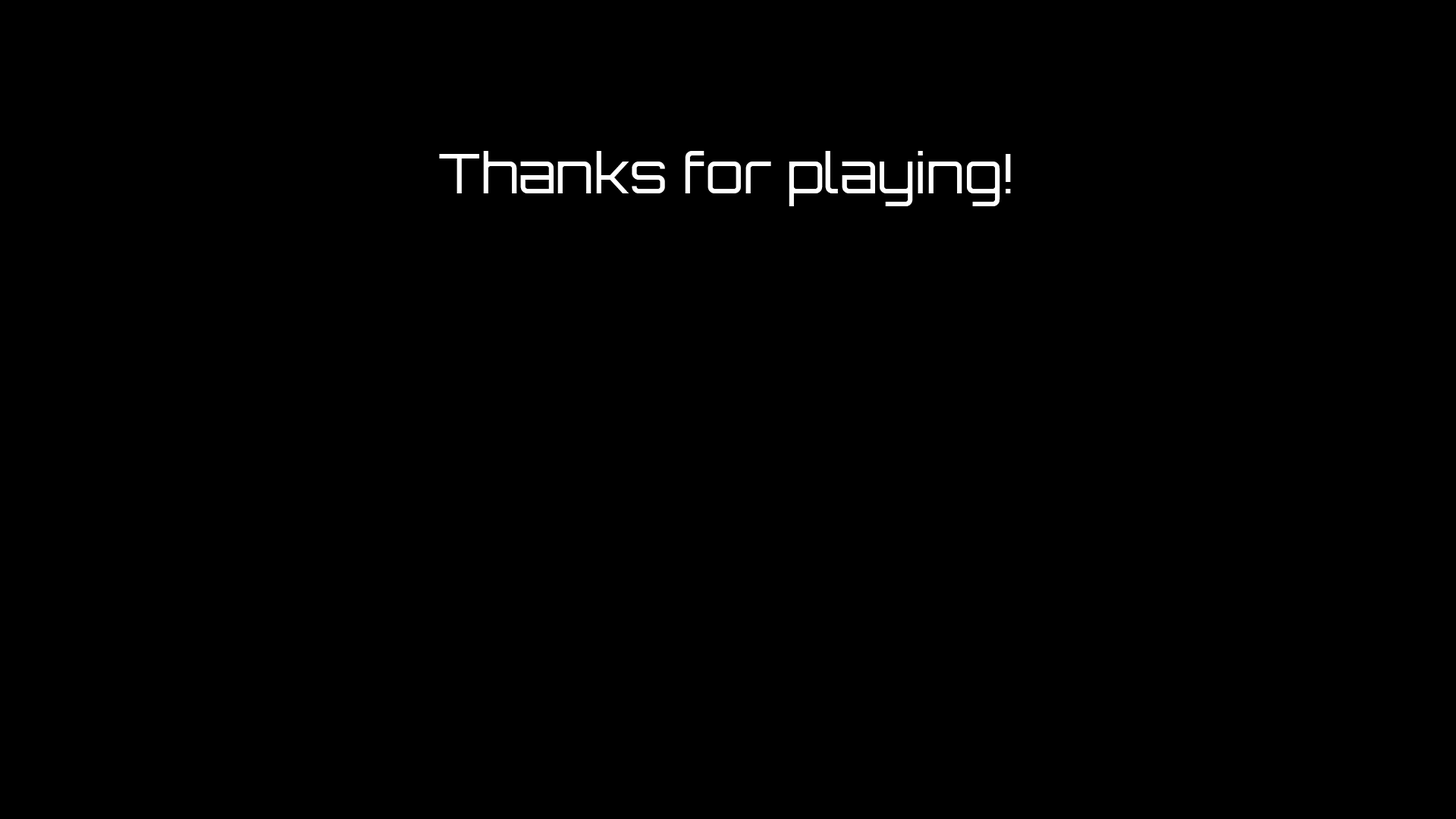
<style>
.page{position:relative;width:1456px;height:819px;background:#000000}
.page>*{position:absolute;margin:0}
.t1{font:55.4px "Orbitron-Regular";color:#ffffff}
</style>
<div class="page">
<p class="t1" style="left:439px;top:151px;width:572px;height:55px">Thanks for playing!</p>
</div>
